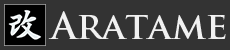
<style>
.page{position:relative;width:230px;height:50px;background:#333333}
.page>*{position:absolute;margin:0}
.t1{font:36.8px "TrajanPro-Bold";color:#f1f1f1}
</style>
<div class="page">
<p class="t1" style="left:48px;top:11px;width:178px;height:28px">Aratame</p>
</div>
